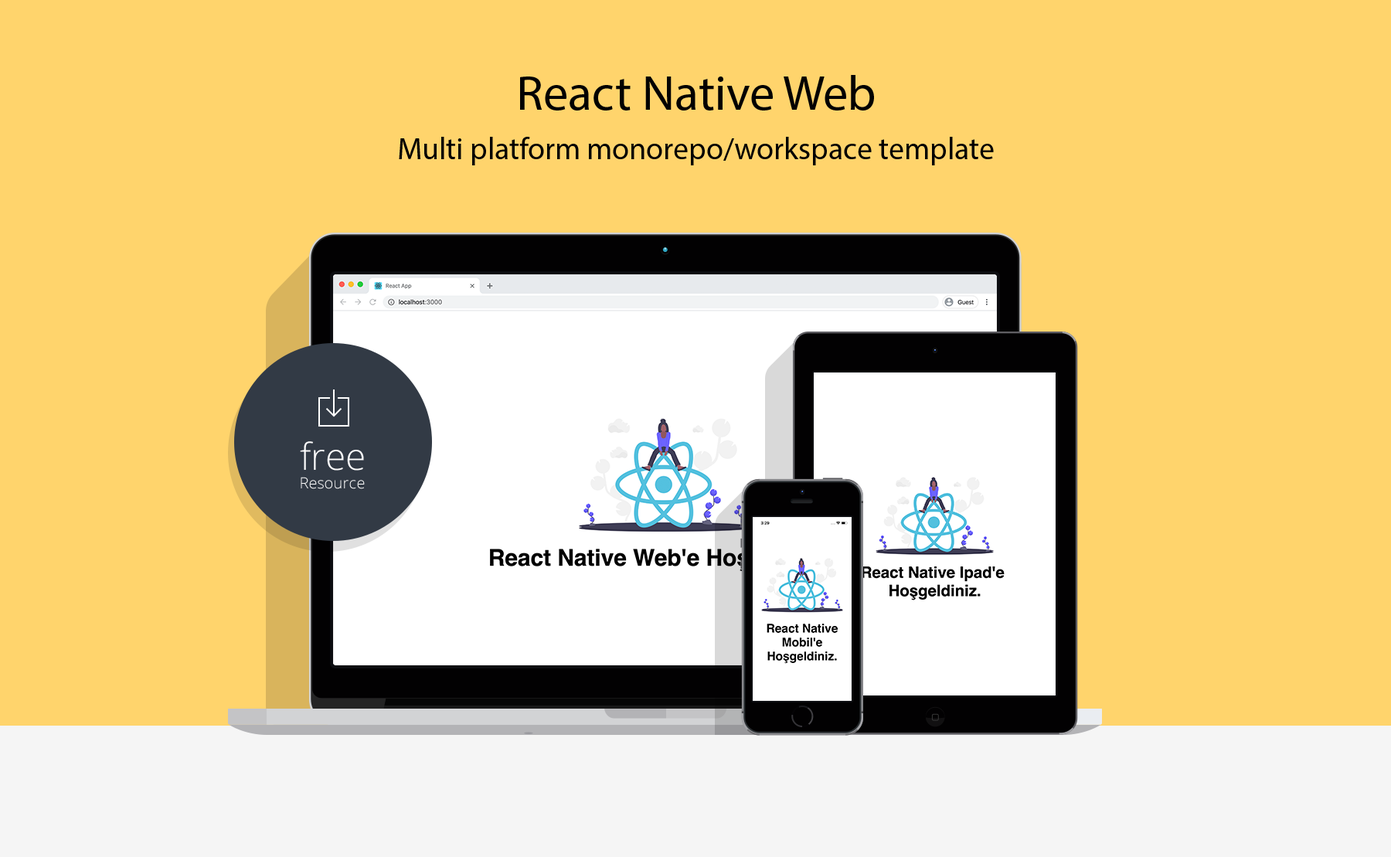
<style>
.page{position:relative;width:1391px;height:857px;background:#ffd46c}
.page>*{position:absolute;margin:0}
.t1{font:30.9px/49.5px "OpenSans-Light";color:#020102}
.t2{font:49.5px/49.5px "OpenSans-Light";color:#020102}
.t3{font:15.5px/18.5px "OpenSans-Light";color:#ffffff}
.t4{font:37.1px/18.5px "OpenSans-Light";color:#ffffff}
</style>
<div class="page">
<p class="t1" style="left:399px;top:75px;width:595px;height:90px;text-align:center"><span class="t2">React Native Web<br></span>Multi platform monorepo/workspace template</p>
<p class="t3" style="left:300px;top:441px;width:65px;height:48px;text-align:center"><span class="t4">free<br></span>Resource</p>
</div>
